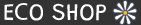
<style>
.page{position:relative;width:141px;height:25px;background:#333333}
.page>*{position:absolute;margin:0}
.t1{font:24px "Grandstander-Regular";color:#ffffff}
.t2{font:24px "MyriadPro-Regular";color:#ffffff}
</style>
<div class="page">
<p class="t1" style="left:4px;top:3px;width:102px;height:18px">E<span class="t2">С</span>O SHOP</p>
</div>
